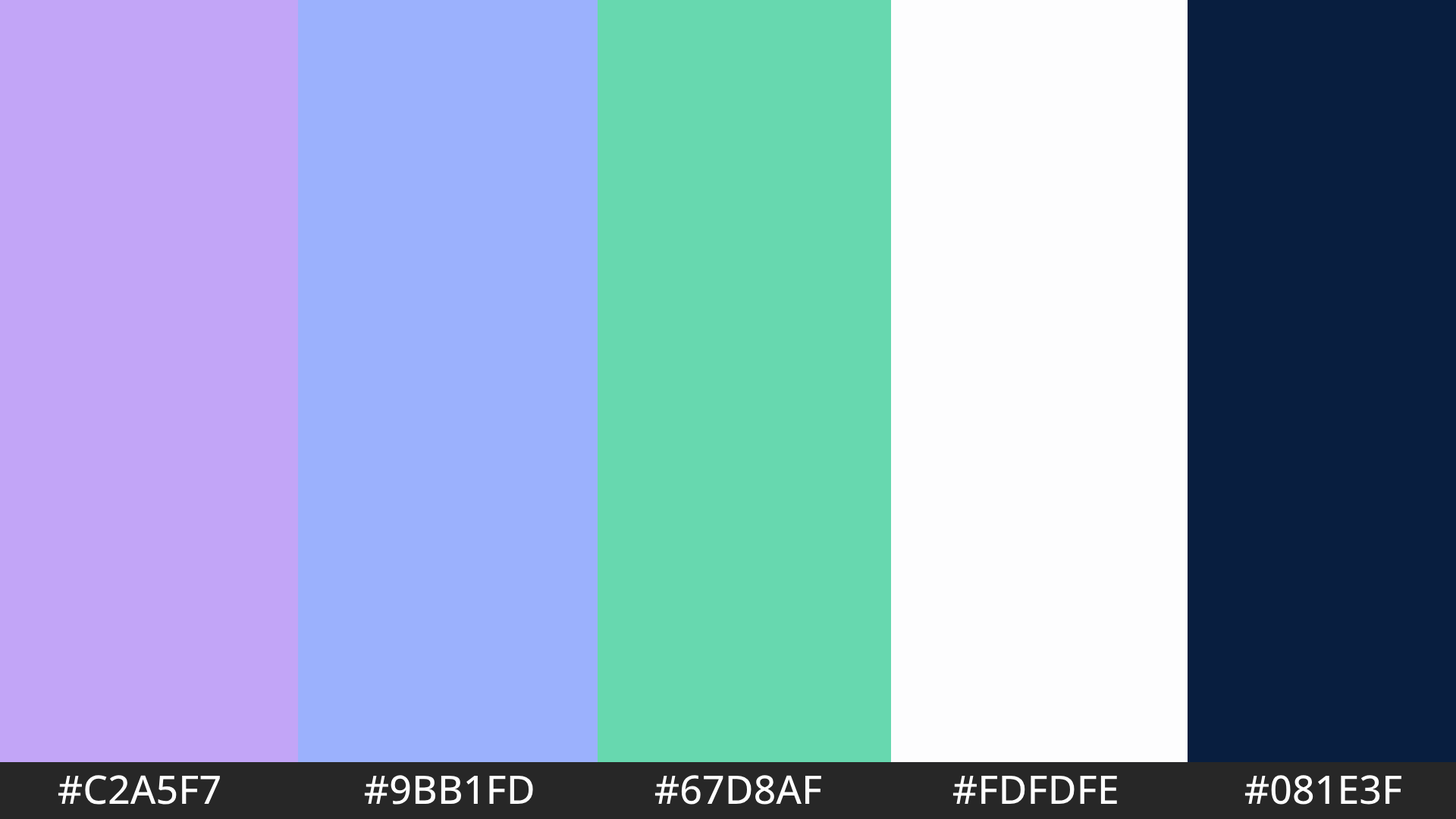
<style>
.page{position:relative;width:1456px;height:819px}
.page>*{position:absolute;margin:0}
.t1{font:39.4px "OpenSans-Medium";color:#ffffff}
</style>
<div class="page">
<p class="t1" style="left:58px;top:775px;width:162px;height:30px">#C2A5F7</p>
<p class="t1" style="left:364px;top:775px;width:169px;height:30px">#9BB1FD</p>
<p class="t1" style="left:654px;top:775px;width:167px;height:30px">#67D8AF</p>
<p class="t1" style="left:952px;top:775px;width:165px;height:29px">#FDFDFE</p>
<p class="t1" style="left:1244px;top:775px;width:157px;height:30px">#081E3F</p>
</div>
